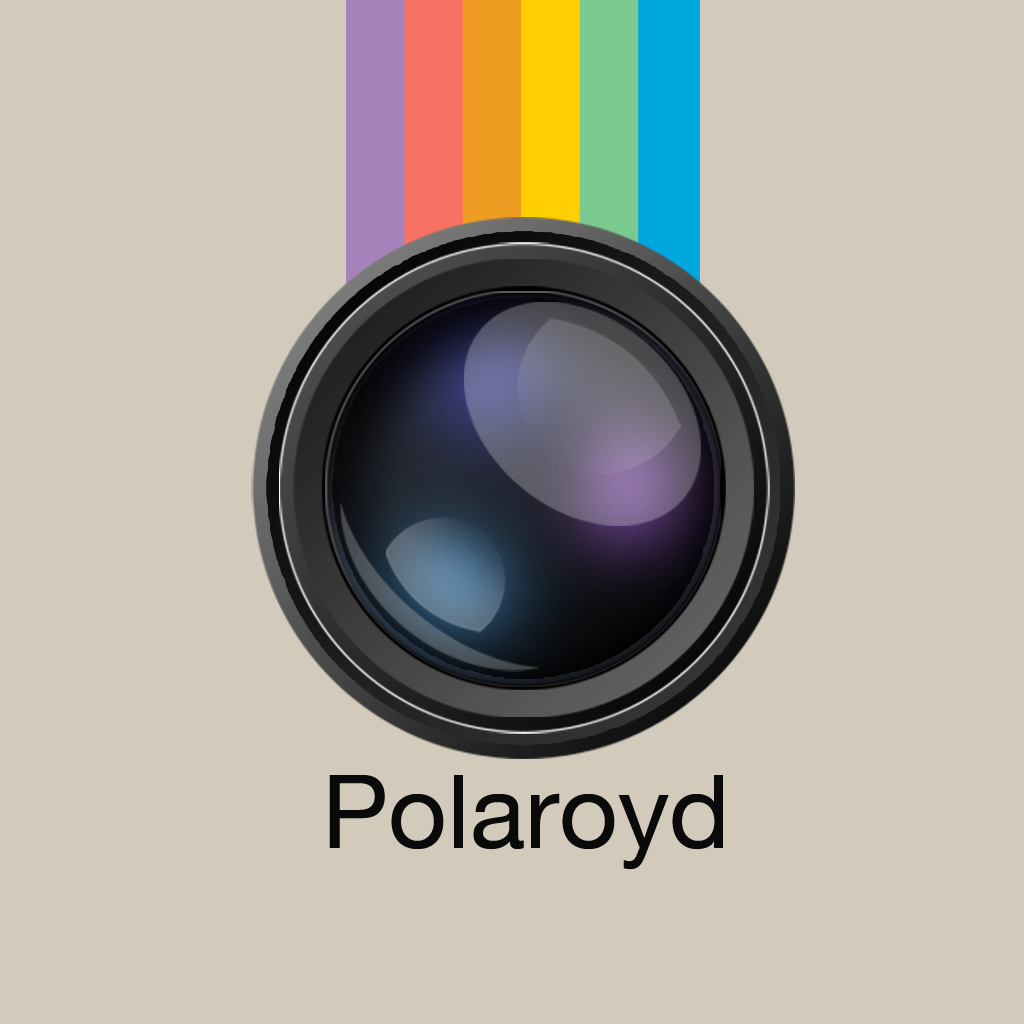
<style>
.page{position:relative;width:1024px;height:1024px;background:#d2cbbb}
.page>*{position:absolute;margin:0}
.t1{font:102.6px "HelveticaNeue";color:#0a0a0a}
</style>
<div class="page">
<p class="t1" style="left:329px;top:775px;width:394px;height:95px">Polaroyd</p>
</div>
